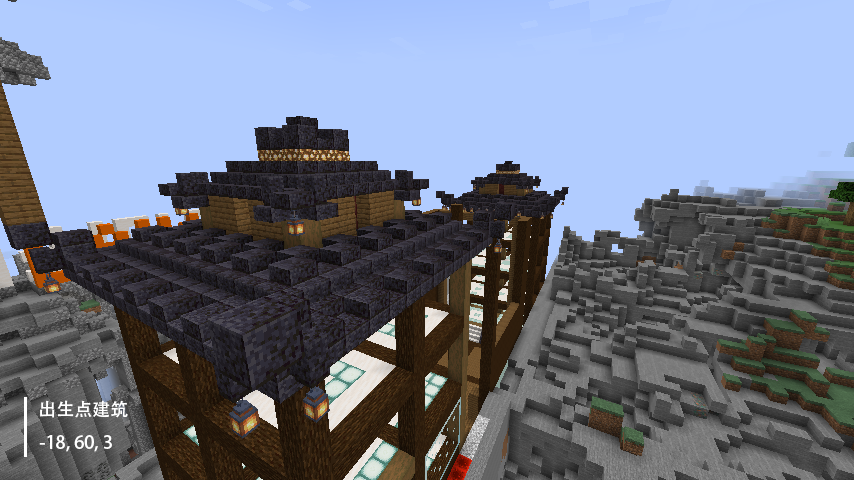
<style>
.page{position:relative;width:854px;height:480px;background:#b1ccff}
.page>*{position:absolute;margin:0}
.t1{font:18px "AdobeHeitiStd-Regular";color:#ffffff}
</style>
<div class="page">
<p class="t1" style="left:40px;top:400px;width:88px;height:18px">出生点建筑</p>
<p class="t1" style="left:39px;top:435px;width:73px;height:17px">-18, 60, 3</p>
</div>
